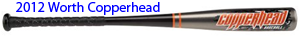
<style>
.page{position:relative;width:300px;height:40px;background:#ffffff}
.page>*{position:absolute;margin:0}
.t1{font:14px "MyriadPro-Regular";color:#0000ff}
</style>
<div class="page">
<p class="t1" style="left:16px;top:2px;width:144px;height:13px">2012 Worth Copperhead</p>
</div>
